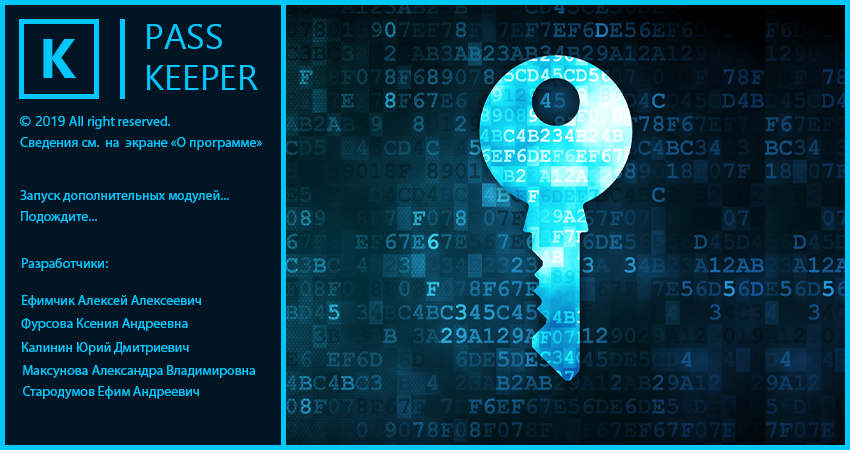
<style>
.page{position:relative;width:850px;height:450px;background:#001523}
.page>*{position:absolute;margin:0}
.t1{font:34.7px "NirmalaUI";color:#00c7ff}
.t2{font:55.6px "NirmalaUI-Bold";color:#00c7ff}
.t3{font:13.9px "MyriadPro-Regular";color:#00c7ff}
.t4{font:13.9px "NirmalaUI";color:#00c7ff}
</style>
<div class="page">
<p class="t1" style="left:147px;top:24px;width:111px;height:66px">PASS<br>KEEPER</p>
<p class="t2" style="left:43px;top:39px;width:33px;height:39px">K</p>
<p class="t3" style="left:20px;top:116px;width:150px;height:13px"><span class="t4">© 2019 </span>All right reserved.</p>
<p class="t3" style="left:20px;top:137px;width:242px;height:13px">Сведения см.  на  экране «О программе»</p>
<p class="t3" style="left:20px;top:190px;width:209px;height:13px">Запуск дополнительных модулей...</p>
<p class="t3" style="left:21px;top:211px;width:76px;height:13px">Подождите...</p>
<p class="t3" style="left:22px;top:258px;width:86px;height:13px">Разработчики:</p>
<p class="t3" style="left:22px;top:295px;width:179px;height:13px">Ефимчик Алексей Алексеевич</p>
<p class="t3" style="left:21px;top:318px;width:167px;height:13px">Фурсова Ксения Андреевна</p>
<p class="t3" style="left:22px;top:342px;width:167px;height:13px">Калинин Юрий Дмитриевич</p>
<p class="t3" style="left:23px;top:365px;width:232px;height:13px">Максунова Александра Владимировна</p>
<p class="t3" style="left:23px;top:386px;width:176px;height:13px">Стародумов Ефим Андреевич</p>
</div>
